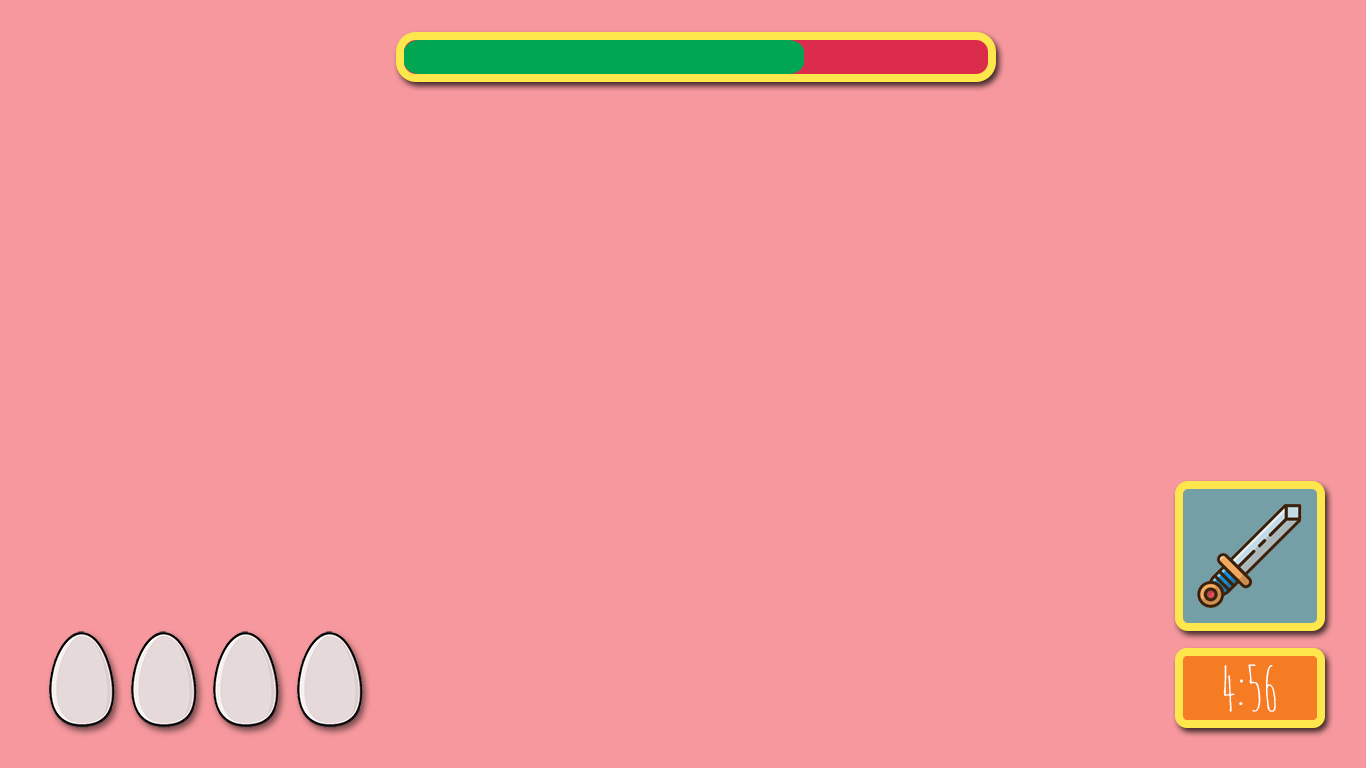
<style>
.page{position:relative;width:1366px;height:768px;background:#f6989d}
.page>*{position:absolute;margin:0}
.t1{font:60px "AmaticSC-Regular";color:#ffffff}
</style>
<div class="page">
<p class="t1" style="left:1223px;top:664px;width:53px;height:48px">4:56</p>
</div>
